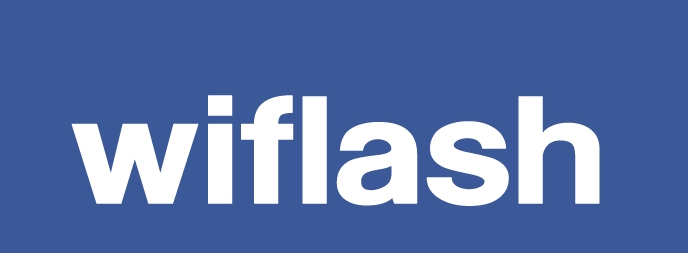
<style>
.page{position:relative;width:688px;height:253px;background:#3b5998}
.page>*{position:absolute;margin:0}
.t1{font:148px "Coolvetica";color:#ffffff;font-weight:bold;scale:1.12 1}
</style>
<div class="page">
<p class="t1" style="left:71px;top:95px;width:529px;height:111px">wiflash</p>
</div>
